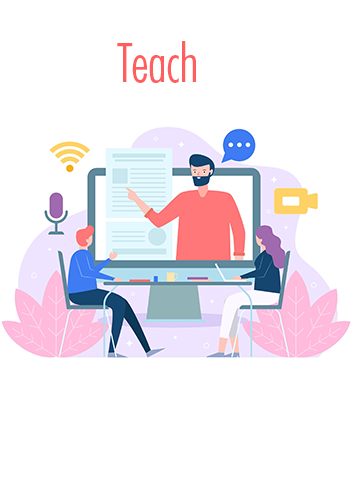
<style>
.page{position:relative;width:352px;height:502px;background:#ffffff}
.page>*{position:absolute;margin:0}
.t1{font:51.2px "Futura-CondensedLight";color:#ff5e5e}
</style>
<div class="page">
<p class="t1" style="left:117px;top:41px;width:79px;height:42px">Teach</p>
</div>
